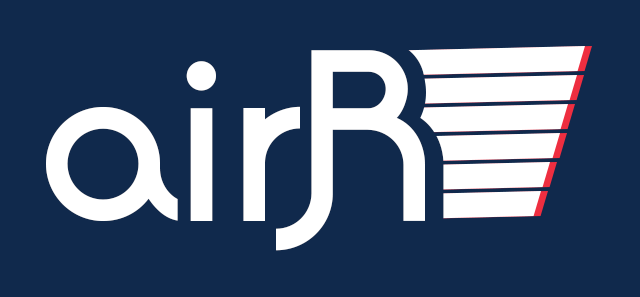
<style>
.page{position:relative;width:640px;height:297px;background:#10294c}
.page>*{position:absolute;margin:0}
.t1{font:247.3px "Quadranta-Bold"}
.t2{font:228.2px "Quadranta-Bold";color:#ffffff}
</style>
<div class="page">
<p class="t1" style="left:32px;top:41px;width:412px;height:217px">airR</p>
<p class="t2" style="left:46px;top:50px;width:379px;height:201px">airR</p>
</div>
